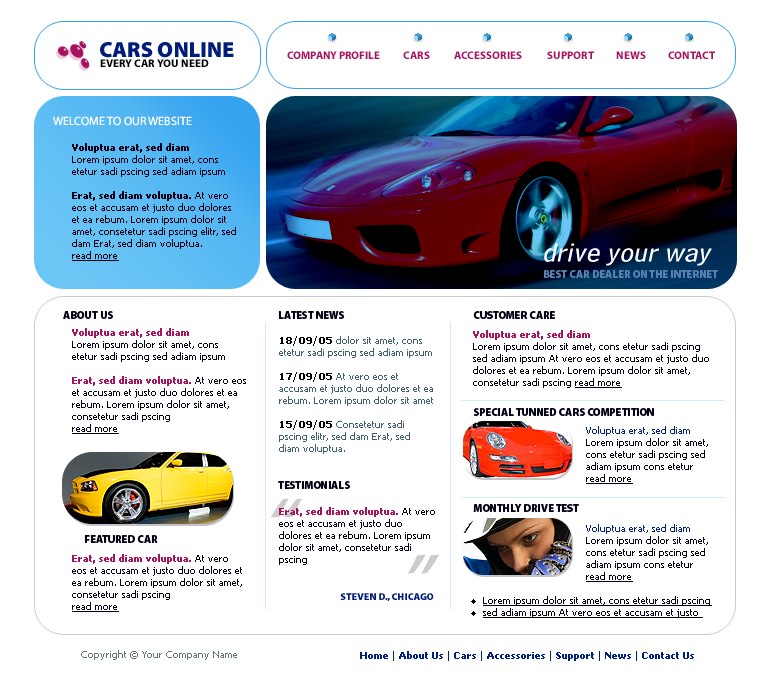
<style>
.page{position:relative;width:775px;height:680px;background:#ffffff}
.page>*{position:absolute;margin:0}
.t1{font:21.9px "MyriadPro-Black";color:#001e79;text-transform:uppercase}
.t2{font:11px "MyriadPro-Bold";color:#a61260;text-transform:uppercase}
.t3{font:11px "MyriadPro-Bold";color:#000000;text-transform:uppercase}
.t4{font:12px "MyriadPro-Regular";color:#ffffff;text-transform:uppercase}
.t5{font:10px "Tahoma";color:#000014}
.t6{font:10px "Tahoma-Bold";color:#000014}
.t7{font:10px "Tahoma";color:#000014;text-decoration:underline}
.t8{font:26.1px "BellCentennialBT-Address";color:#ffffff;font-style:italic;scale:1.19 1}
.t9{font:10.6px "MyriadPro-Black";color:#5880b1;text-transform:uppercase}
.t10{font:10.6px "MyriadPro-Black";color:#000012;text-transform:uppercase}
.t11{font:10px "Tahoma-Bold";color:#a61260}
.t12{font:10px "Tahoma";color:#406070}
.t13{font:10px "Tahoma-Bold";color:#000000}
.t14{font:10px "Tahoma";color:#00207f}
.t15{font:76.1px "MyriadPro-Regular";color:#cccccc;font-style:italic;scale:1.19 1}
.t16{font:9.9px "MyriadPro-Black";color:#001e79;text-transform:uppercase}
.t17{font:10px "Tahoma";color:#647177}
.t18{font:10px "Tahoma-Bold";color:#00207f}
</style>
<div class="page">
<p class="t1" style="left:100px;top:42px;width:134px;height:16px">CARS ONLINE</p>
<p class="t2" style="left:287px;top:51px;width:93px;height:8px">COMPANY PROFILE</p>
<p class="t2" style="left:403px;top:51px;width:27px;height:8px">CARS</p>
<p class="t2" style="left:454px;top:51px;width:68px;height:8px">ACCESSORIES</p>
<p class="t2" style="left:547px;top:51px;width:47px;height:8px">SUPPORT</p>
<p class="t2" style="left:616px;top:51px;width:30px;height:8px">NEWS</p>
<p class="t2" style="left:668px;top:51px;width:47px;height:8px">CONTACT</p>
<p class="t3" style="left:100px;top:59px;width:109px;height:8px">every car you need</p>
<p class="t4" style="left:53px;top:116px;width:139px;height:10px">WELCOME TO OUR WEBSITE</p>
<p class="t5" style="left:72px;top:143px;width:164px;height:118px"><span class="t6">Voluptua erat, sed diam<br></span>Lorem ipsum dolor sit amet, cons etetur sadi pscing sed adiam ipsum <br><br><span class="t6">Erat, sed diam voluptua.</span> At vero eos et accusam et justo duo dolores et ea rebum. Lorem ipsum dolor sit amet, consetetur sadi pscing elitr, sed dam Erat, sed diam voluptua.<br><span class="t7">read more</span></p>
<p class="t8" style="left:544px;top:243px;width:168px;height:23px">drive your way</p>
<p class="t9" style="left:543px;top:270px;width:175px;height:8px">BEST CAR DEALER ON THE INTERNET</p>
<p class="t10" style="left:63px;top:311px;width:50px;height:8px">ABOUT US</p>
<p class="t10" style="left:278px;top:311px;width:67px;height:8px">LATEST NEWS</p>
<p class="t10" style="left:473px;top:311px;width:82px;height:8px">CUSTOMER CARE</p>
<p class="t5" style="left:72px;top:328px;width:174px;height:106px"><span class="t11">Voluptua erat, sed diam<br></span>Lorem ipsum dolor sit amet, cons etetur sadi pscing sed adiam ipsum <br><br><span class="t11">Erat, sed diam voluptua.</span> At vero eos et accusam et justo duo dolores et ea rebum. Lorem ipsum dolor sit amet, consetetur sadi pscing<br><span class="t7">read more</span></p>
<p class="t12" style="left:279px;top:336px;width:154px;height:118px"><span class="t13">18/09/05 </span>dolor sit amet, cons etetur sadi pscing sed adiam ipsum <br><br><span class="t13">17/09/05 </span>At vero eos et accusam et justo duo dolores et ea rebum. Lorem ipsum dolor sit amet<br><br><span class="t13">15/09/05 </span>Consetetur sadi pscing elitr, sed dam Erat, sed diam voluptua.</p>
<p class="t5" style="left:473px;top:330px;width:236px;height:58px"><span class="t11">Voluptua erat, sed diam<br></span>Lorem ipsum dolor sit amet, cons etetur sadi pscing sed adiam ipsum At vero eos et accusam et justo duo dolores et ea rebum. Lorem ipsum dolor sit amet, consetetur sadi pscing <span class="t7">read more</span></p>
<p class="t10" style="left:473px;top:408px;width:181px;height:8px">SPECIAL TUNNED CARS COMPETITION</p>
<p class="t5" style="left:586px;top:426px;width:122px;height:58px"><span class="t14">Voluptua erat, sed diam<br></span>Lorem ipsum dolor sit amet, cons etetur sadi pscing sed adiam ipsum cons etetur  <br><span class="t7">read more</span></p>
<p class="t10" style="left:278px;top:481px;width:72px;height:8px">TESTIMONIALS</p>
<p class="t15" style="left:271px;top:498px;width:31px;height:20px">“</p>
<p class="t5" style="left:279px;top:507px;width:156px;height:58px"><span class="t11">Erat, sed diam voluptua.</span> At vero eos et accusam et justo duo dolores et ea rebum. Lorem ipsum dolor sit amet, consetetur sadi pscing</p>
<p class="t10" style="left:473px;top:504px;width:106px;height:8px">MONTHLY DRIVE TEST</p>
<p class="t5" style="left:586px;top:524px;width:122px;height:58px"><span class="t14">Voluptua erat, sed diam<br></span>Lorem ipsum dolor sit amet, cons etetur sadi pscing sed adiam ipsum cons etetur  <br><span class="t7">read more</span></p>
<p class="t10" style="left:84px;top:535px;width:74px;height:8px">FEATURED CAR</p>
<p class="t5" style="left:72px;top:554px;width:170px;height:58px"><span class="t11">Erat, sed diam voluptua.</span> At vero<br>eos et accusam et justo duo dolores et ea rebum. Lorem ipsum dolor sit amet, consetetur sadi pscing<br><span class="t7">read more</span></p>
<p class="t15" style="left:408px;top:554px;width:31px;height:20px;rotate:-180deg">“</p>
<p class="t16" style="left:340px;top:593px;width:94px;height:8px">STEVEN D., CHICAGO</p>
<p class="t7" style="left:483px;top:596px;width:229px;height:22px">Lorem ipsum dolor sit amet, cons etetur sadi pscing sed adiam ipsum At vero eos et accusam et justo</p>
<p class="t17" style="left:81px;top:650px;width:156px;height:10px">Copyright © Your Company Name</p>
<p class="t18" style="left:360px;top:651px;width:334px;height:10px"><span class="t14">  </span>Home<span class="t14"> | </span>About Us <span class="t14">| </span>Cars <span class="t14">| </span>Accessories <span class="t14">| </span>Support <span class="t14">| </span>News<span class="t14"> | </span>Contact Us</p>
</div>
